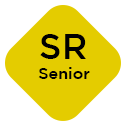
<style>
.page{position:relative;width:125px;height:125px;background:#e4cc00}
.page>*{position:absolute;margin:0}
.t1{font:35px "GothamMedium";color:#000000}
.t2{font:16px "GothamMedium";color:#000000}
</style>
<div class="page">
<p class="t1" style="left:40px;top:34px;width:46px;height:25px">SR</p>
<p class="t2" style="left:38px;top:67px;width:52px;height:12px">Senior</p>
</div>
